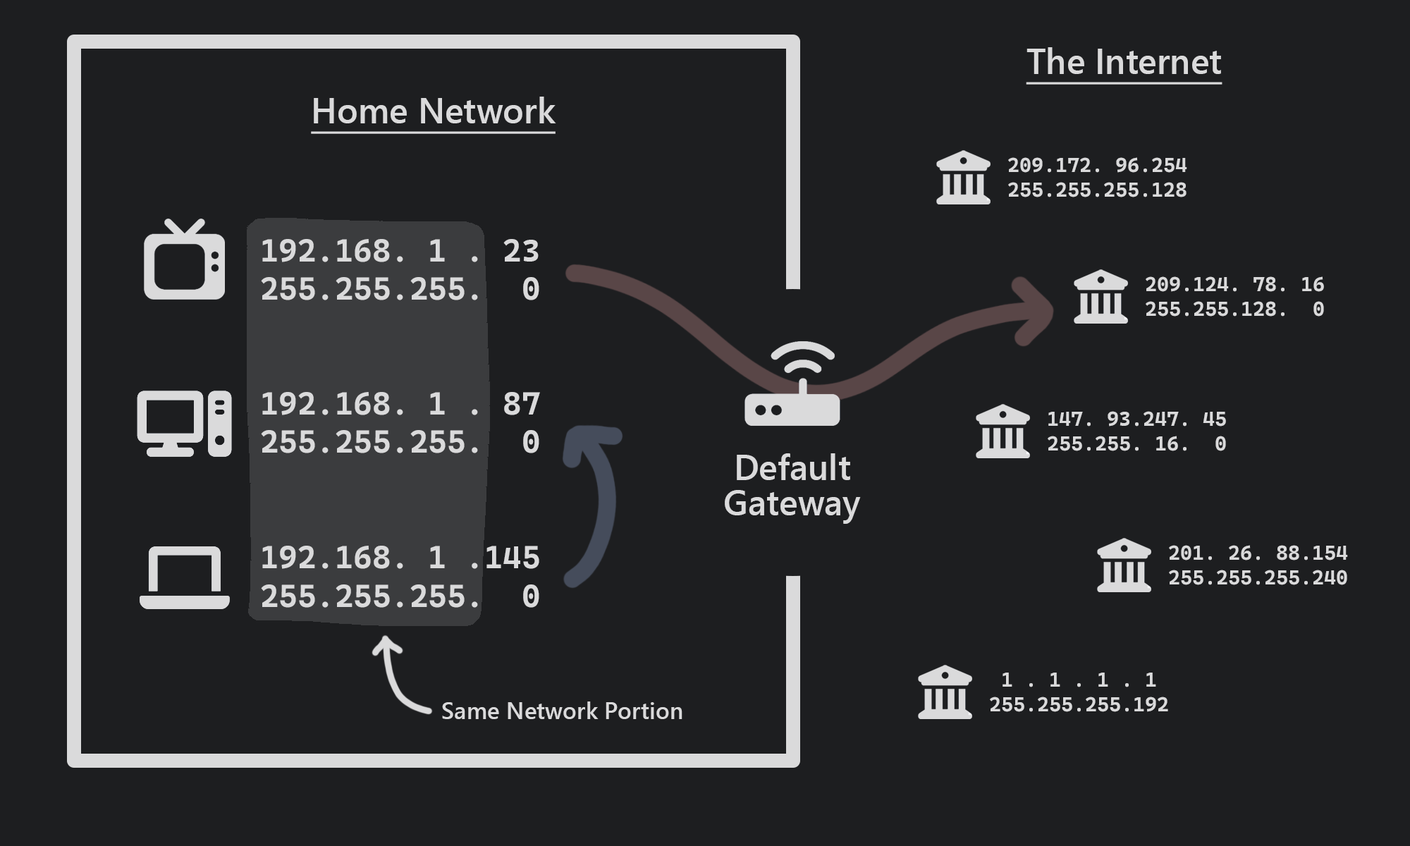
<style>
.page{position:relative;width:1410px;height:846px;background:#1d1e20}
.page>*{position:absolute;margin:0}
.t1{font:35.2px "SegoeUI-Semibold";color:#dadadb;text-decoration:underline}
.t2{font:20.4px "CascadiaCodeRoman-Bold";color:#dadadb}
.t3{font:31.9px "CascadiaCodeRoman-Bold";color:#dadadb}
.t4{font:35.2px/35.2px "SegoeUI-Semibold";color:#dadadb}
.t5{font:23.5px "SegoeUI-Semibold";color:#dadadb}
</style>
<div class="page">
<p class="t1" style="left:1026px;top:47px;width:196px;height:38px">The Internet</p>
<p class="t1" style="left:311px;top:97px;width:245px;height:37px">Home Network</p>
<p class="t2" style="left:1008px;top:157px;width:179px;height:40px;text-align:center">209.172. 96.254<br>255.255.255.128</p>
<p class="t3" style="left:261px;top:239px;width:278px;height:61px;text-align:center">192.168. 1 . 23<br>255.255.255.  0</p>
<p class="t2" style="left:1145px;top:276px;width:179px;height:40px;text-align:center">209.124. 78. 16<br>255.255.128.  0</p>
<p class="t3" style="left:261px;top:392px;width:279px;height:61px;text-align:center">192.168. 1 . 87<br>255.255.255.  0</p>
<p class="t2" style="left:1047px;top:411px;width:179px;height:40px;text-align:center">147. 93.247. 45<br>255.255. 16.  0</p>
<p class="t4" style="left:725px;top:453px;width:136px;height:71px;text-align:center">Default<br>Gateway</p>
<p class="t3" style="left:261px;top:546px;width:278px;height:62px;text-align:center">192.168. 1 .145<br>255.255.255.  0</p>
<p class="t2" style="left:1169px;top:545px;width:179px;height:40px;text-align:center">201. 26. 88.154<br>255.255.255.240</p>
<p class="t2" style="left:990px;top:672px;width:178px;height:40px;text-align:center">1 . 1 . 1 . 1  <br>255.255.255.192</p>
<p class="t5" style="left:442px;top:701px;width:240px;height:18px">Same Network Portion</p>
</div>
